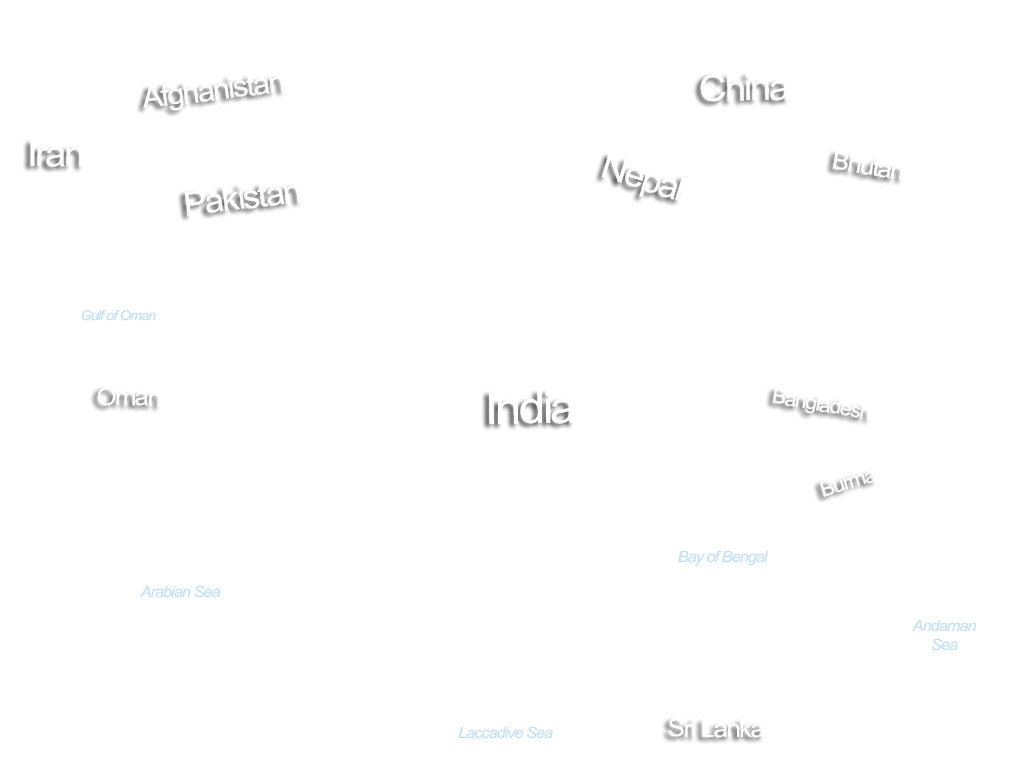
<style>
.page{position:relative;width:1024px;height:768px;background:#ffffff}
.page>*{position:absolute;margin:0}
.t1{font:36.6px "ArialMT";letter-spacing:-0.06em;color:#ffffff;scale:1.05 1}
.t2{font:36.1px "ArialMT";letter-spacing:-0.06em;color:#ffffff;scale:1.05 1}
.t3{font:32.9px "ArialMT";letter-spacing:-0.06em;color:#ffffff;scale:1.05 1}
.t4{font:13.6px "Arial-ItalicMT";letter-spacing:-0.06em;color:#bedefa;scale:1.05 1}
.t5{font:24.5px "ArialMT";letter-spacing:-0.06em;color:#ffffff;scale:1.05 1}
.t6{font:45.1px "ArialMT";letter-spacing:-0.06em;color:#ffffff;scale:1.05 1}
.t7{font:15.5px "Arial-ItalicMT";letter-spacing:-0.06em;color:#bedefa;scale:1.05 1}
.t8{font:15.5px/27.1px "Arial-ItalicMT";letter-spacing:-0.06em;color:#bedefa;scale:1.05 1}
.t9{font:15.5px/19px "Arial-ItalicMT";letter-spacing:-0.06em;color:#bedefa;scale:1.05 1}
.t10{font:24.8px "ArialMT";letter-spacing:-0.06em;color:#ffffff;scale:1.05 1}
</style>
<div class="page">
<p class="t1" style="left:700px;top:73px;width:89px;height:29px;rotate:-1deg">China</p>
<p class="t2" style="left:30px;top:140px;width:53px;height:27px;rotate:1deg">Iran</p>
<p class="t3" style="left:184px;top:183px;width:117px;height:33px;rotate:-7deg">Pakistan</p>
<p class="t4" style="left:81px;top:310px;width:75px;height:11px">Gulf of Oman</p>
<p class="t5" style="left:97px;top:387px;width:64px;height:20px;rotate:1deg">Oman</p>
<p class="t6" style="left:489px;top:390px;width:86px;height:34px;rotate:-1deg">India</p>
<p class="t7" style="left:678px;top:550px;width:91px;height:16px">Bay of Bengal</p>
<p class="t7" style="left:140px;top:585px;width:81px;height:13px">Arabian Sea</p>
<p class="t8" style="left:912px;top:619px;width:65px;height:32px;text-align:center">Andaman<br><span class="t9">Sea</span></p>
<p class="t7" style="left:458px;top:726px;width:95px;height:13px">Laccadive Sea</p>
<p class="t10" style="left:668px;top:718px;width:96px;height:20px">Sri Lanka</p>
</div>
